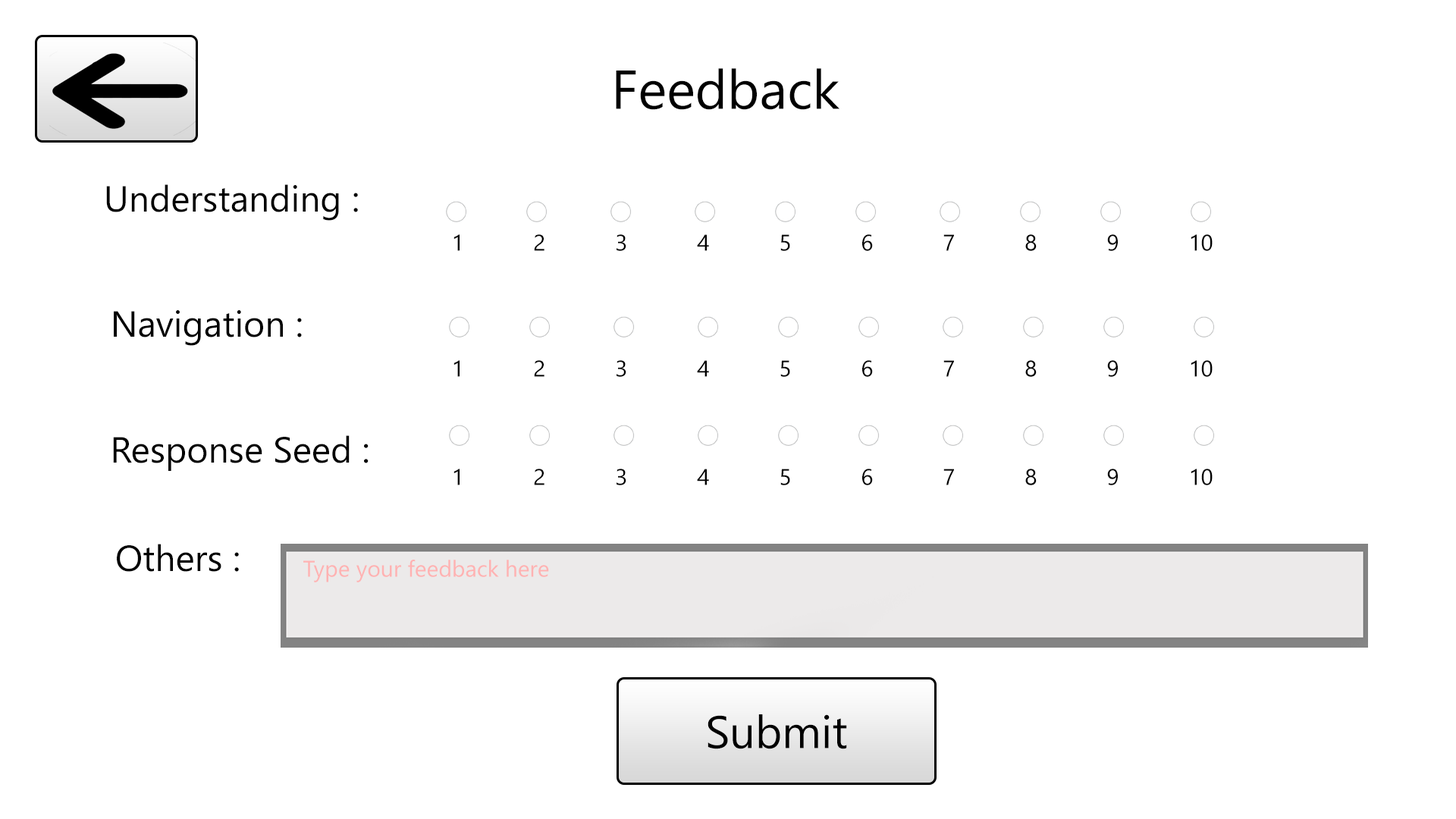
<style>
.page{position:relative;width:1456px;height:819px;background:#ffffff}
.page>*{position:absolute;margin:0}
.t1{font:54.6px "SegoeUI";color:#000000}
.t2{font:36.4px "SegoeUI";color:#000000}
.t3{font:22.7px "SegoeUI";color:#000000}
.t4{font:22.7px "SegoeUI";color:#ffb2b2}
.t5{font:45.5px "SegoeUI";color:#000000}
</style>
<div class="page">
<p class="t1" style="left:616px;top:68px;width:223px;height:42px">Feedback</p>
<p class="t2" style="left:106px;top:184px;width:252px;height:37px">Understanding :</p>
<p class="t3" style="left:453px;top:234px;width:760px;height:17px">1   2   3   4   5   6   7   8   9   10</p>
<p class="t2" style="left:114px;top:310px;width:188px;height:36px">Navigation :</p>
<p class="t3" style="left:453px;top:360px;width:760px;height:17px">1   2   3   4   5   6   7   8   9   10</p>
<p class="t2" style="left:113px;top:435px;width:256px;height:36px">Response Seed :</p>
<p class="t3" style="left:453px;top:469px;width:760px;height:16px">1   2   3   4   5   6   7   8   9   10</p>
<p class="t2" style="left:117px;top:544px;width:122px;height:28px">Others :</p>
<p class="t4" style="left:303px;top:560px;width:246px;height:22px">Type your feedback here</p>
<p class="t5" style="left:708px;top:714px;width:139px;height:35px">Submit</p>
</div>
